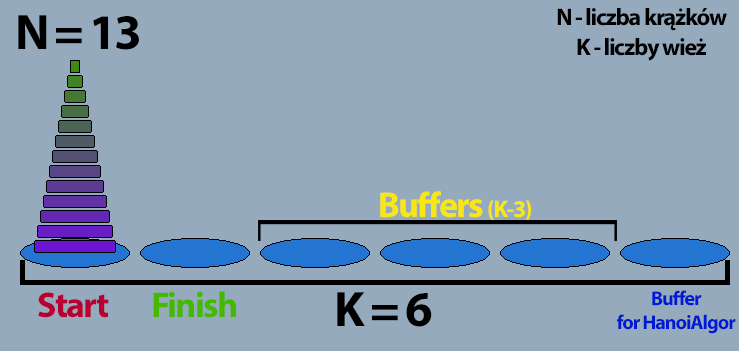
<style>
.page{position:relative;width:739px;height:351px;background:#96aabe}
.page>*{position:absolute;margin:0}
.t1{font:50px "MyriadPro-Bold";letter-spacing:-0.05em;color:#000000}
.t2{font:24px/30px "MyriadPro-Bold";letter-spacing:-0.05em;color:#000000}
.t3{font:36px "MyriadPro-Bold";letter-spacing:-0.05em;color:#f9e615}
.t4{font:24px "MyriadPro-Bold";letter-spacing:-0.05em;color:#f9e615}
.t5{font:36px "MyriadPro-Bold";letter-spacing:-0.05em;color:#b80030}
.t6{font:36px "MyriadPro-Bold";letter-spacing:-0.05em;color:#45b800}
.t7{font:20px/24px "MyriadPro-Bold";letter-spacing:-0.05em;color:#0019d1}
</style>
<div class="page">
<p class="t1" style="left:18px;top:15px;width:121px;height:35px">N = 13</p>
<p class="t2" style="left:557px;top:8px;width:170px;height:53px;text-align:center">N - liczba krążków<br>K - liczby wież</p>
<p class="t3" style="left:380px;top:191px;width:151px;height:29px">Buffers <span class="t4">(K-3)</span></p>
<p class="t5" style="left:38px;top:292px;width:71px;height:26px">Start</p>
<p class="t6" style="left:153px;top:291px;width:83px;height:27px">Finish</p>
<p class="t1" style="left:337px;top:292px;width:95px;height:35px">K = 6</p>
<p class="t7" style="left:617px;top:290px;width:119px;height:44px;text-align:center">Buffer<br>for HanoiAlgor</p>
</div>
